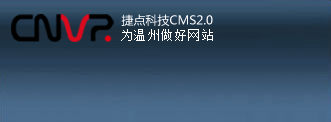
<style>
.page{position:relative;width:331px;height:122px}
.page>*{position:absolute;margin:0}
.t1{font:12px "MicrosoftYaHei";color:#ffffff}
.t2{font:12px "SimSun";letter-spacing:0.13em;color:#ffffff}
</style>
<div class="page">
<p class="t1" style="left:121px;top:14px;width:92px;height:12px">捷点科技CMS2.0</p>
<p class="t2" style="left:121px;top:29px;width:92px;height:12px">为温州做好网站</p>
</div>
